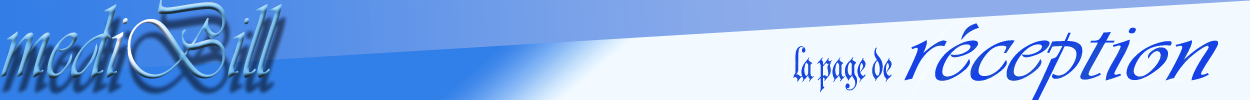
<style>
.page{position:relative;width:1250px;height:100px;background:#f2faff}
.page>*{position:absolute;margin:0}
.t1{font:110.1px "Vivaldii";scale:0.78 1}
.t2{font:80.6px "Parchment-Regular";color:#1e4ed0;scale:0.73 1}
</style>
<div class="page">
<p class="t1" style="left:0px;top:0px;width:282px;height:79px">mediBill</p>
<p class="t2" style="left:793px;top:46px;width:99px;height:47px">la page de</p>
</div>
